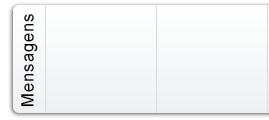
<style>
.page{position:relative;width:269px;height:120px}
.page>*{position:absolute;margin:0}
.t1{font:17px "ArialMT";letter-spacing:0.05em;color:#000000}
</style>
<div class="page">
<p class="t1" style="left:21px;top:14px;width:17px;height:93px;rotate:-90deg">Mensagens</p>
</div>
